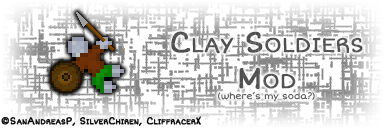
<style>
.page{position:relative;width:384px;height:128px;background:#ffffff}
.page>*{position:absolute;margin:0}
.t1{font:9px "ShortStack";color:#545454}
.t2{font:30px "ShortStack";color:#545454;font-variant:small-caps;font-weight:bold}
.t3{font:10px "ShortStack";color:#000000;font-variant:small-caps;font-weight:bold}
</style>
<div class="page">
<p class="t1" style="left:171px;top:31px;width:192px;height:71px;text-align:center"><span class="t2">Clay Soldiers<br>Mod<br></span>(where’s my soda?)</p>
<p class="t3" style="left:1px;top:116px;width:200px;height:10px">©SanAndreasP, SilverChiren, CliffracerX</p>
</div>
